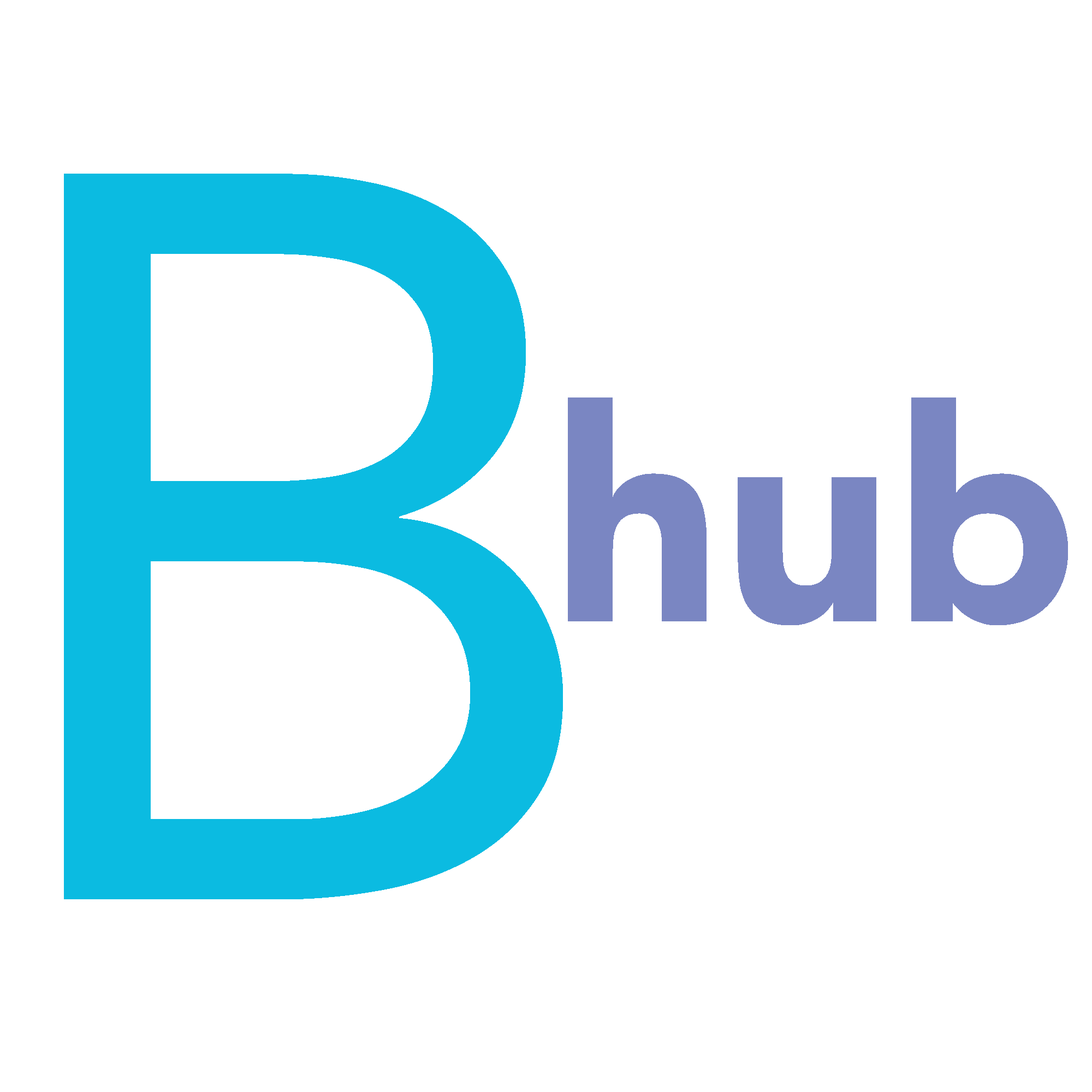
<style>
.page{position:relative;width:1092px;height:1092px;background:#ffffff}
.page>*{position:absolute;margin:0}
.t1{font:1023.7px "Avenir-Roman";color:#0bbbe1}
.t2{font:295.7px "Avenir-Black";color:#7a86c2}
</style>
<div class="page">
<p class="t1" style="left:64px;top:174px;width:499px;height:725px">B</p>
<p class="t2" style="left:568px;top:397px;width:500px;height:228px">hub</p>
</div>
